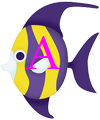
<style>
.page{position:relative;width:100px;height:120px;background:#ffffff}
.page>*{position:absolute;margin:0}
.t1{font:47.9px "TimesNewRomanPSMT";color:#ff00fc}
</style>
<div class="page">
<p class="t1" style="left:26px;top:36px;width:35px;height:33px">A</p>
</div>
